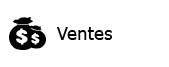
<style>
.page{position:relative;width:169px;height:67px;background:#ffffff}
.page>*{position:absolute;margin:0}
.t1{font:18px "Tahoma";letter-spacing:0.025em;color:#000000}
</style>
<div class="page">
<p class="t1" style="left:57px;top:27px;width:55px;height:13px">Ventes</p>
</div>
